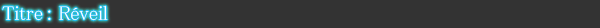
<style>
.page{position:relative;width:600px;height:28px;background:#333333}
.page>*{position:absolute;margin:0}
.t1{font:20px "MS-PMincho";color:#ffffff}
</style>
<div class="page">
<p class="t1" style="left:2px;top:5px;width:106px;height:16px">Titre : Réveil</p>
</div>
